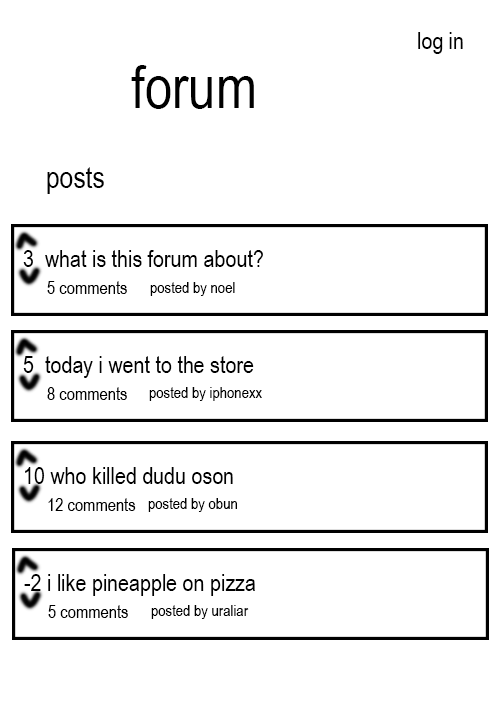
<style>
.page{position:relative;width:504px;height:728px;background:#ffffff}
.page>*{position:absolute;margin:0}
.t1{font:24px "ArialNarrow";color:#000000}
.t2{font:60px "ArialNarrow";color:#000000}
.t3{font:30px "ArialNarrow";color:#000000}
.t4{font:18px "ArialNarrow";color:#000000}
.t5{font:16px "ArialNarrow";color:#000000}
</style>
<div class="page">
<p class="t1" style="left:418px;top:32px;width:45px;height:22px">log in</p>
<p class="t2" style="left:131px;top:65px;width:123px;height:44px">forum</p>
<p class="t3" style="left:47px;top:167px;width:57px;height:27px">posts</p>
<p class="t1" style="left:23px;top:250px;width:240px;height:17px">3  what is this forum about?</p>
<p class="t4" style="left:47px;top:281px;width:80px;height:13px">5 comments</p>
<p class="t5" style="left:150px;top:282px;width:85px;height:14px">posted by noel</p>
<p class="t1" style="left:23px;top:356px;width:231px;height:22px">5  today i went to the store</p>
<p class="t4" style="left:47px;top:387px;width:80px;height:13px">8 comments</p>
<p class="t5" style="left:149px;top:387px;width:113px;height:14px">posted by iphonexx</p>
<p class="t1" style="left:25px;top:467px;width:208px;height:17px">10 who killed dudu oson</p>
<p class="t4" style="left:48px;top:498px;width:88px;height:13px">12 comments</p>
<p class="t5" style="left:148px;top:498px;width:89px;height:14px">posted by obun</p>
<p class="t1" style="left:24px;top:574px;width:231px;height:22px">-2 i like pineapple on pizza</p>
<p class="t4" style="left:48px;top:605px;width:80px;height:13px">5 comments</p>
<p class="t5" style="left:151px;top:605px;width:98px;height:14px">posted by uraliar</p>
</div>
